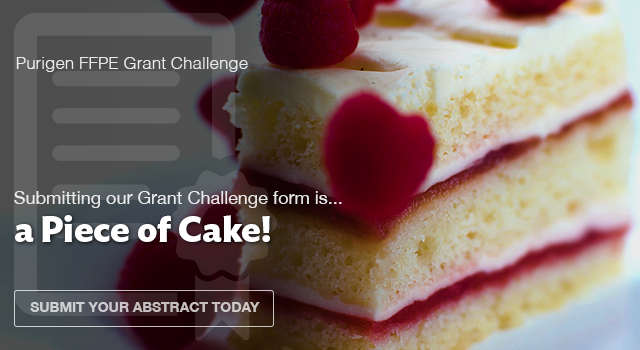
<style>
.page{position:relative;width:640px;height:350px}
.page>*{position:absolute;margin:0}
.t1{font:17px "Helvetica-Light";color:#ffffff}
.t2{font:18px "HelveticaNeue";color:#ffffff}
.t3{font:36px "IdealSans-Bold";letter-spacing:-0.005em;color:#ffffff}
.t4{font:14.1px "HelveticaNeue-Bold";letter-spacing:-0.01em;color:#ccc6c7;text-transform:uppercase}
</style>
<div class="page">
<p class="t1" style="left:16px;top:57px;width:232px;height:15px;opacity:0.85">Purigen FFPE Grant Challenge</p>
<p class="t2" style="left:14px;top:191px;width:328px;height:17px;opacity:0.85">Submitting our Grant Challenge form is...</p>
<p class="t3" style="left:15px;top:215px;width:255px;height:27px">a Piece of Cake!</p>
<p class="t4" style="left:30px;top:302px;width:230px;height:10px">SUBMIT YOUR ABSTRACT TODAY</p>
</div>
